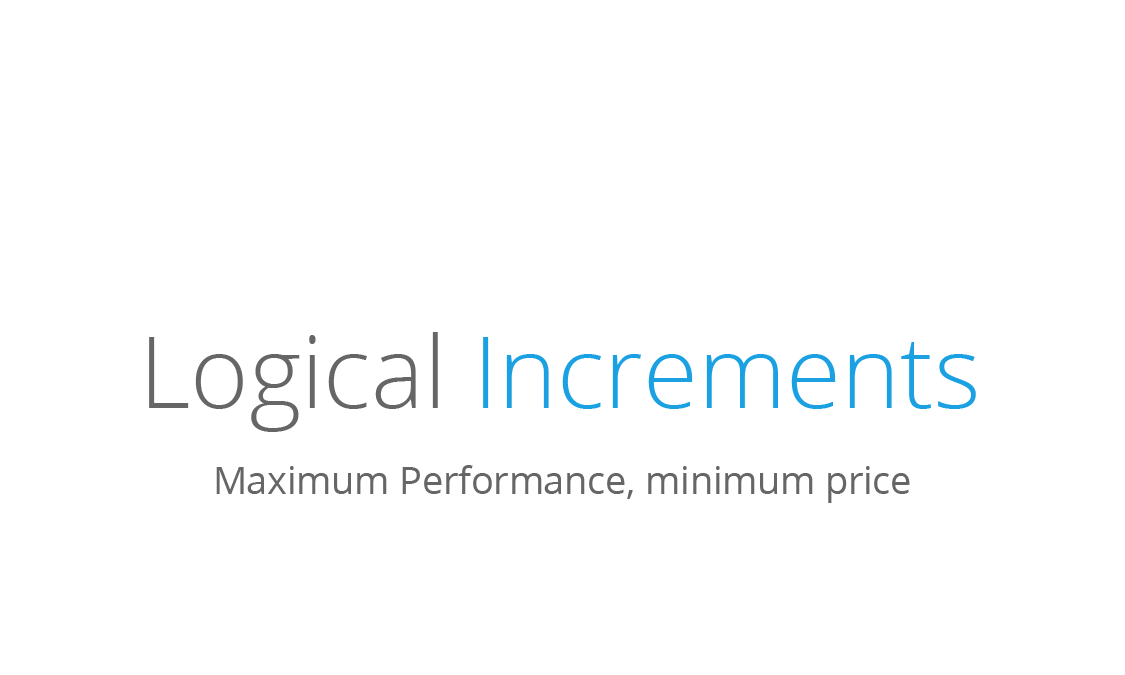
<style>
.page{position:relative;width:1125px;height:675px;background:#ffffff}
.page>*{position:absolute;margin:0}
.t1{font:100px "OpenSans-Light";color:#1ba1e2}
.t2{font:100px "OpenSans-Light";color:#666666}
.t3{font:37.5px "OpenSans";color:#666666}
</style>
<div class="page">
<p class="t1" style="left:149px;top:332px;width:827px;height:100px"><span class="t2">Logical </span>Increments</p>
<p class="t3" style="left:216px;top:465px;width:694px;height:38px">Maximum Performance, minimum price</p>
</div>
